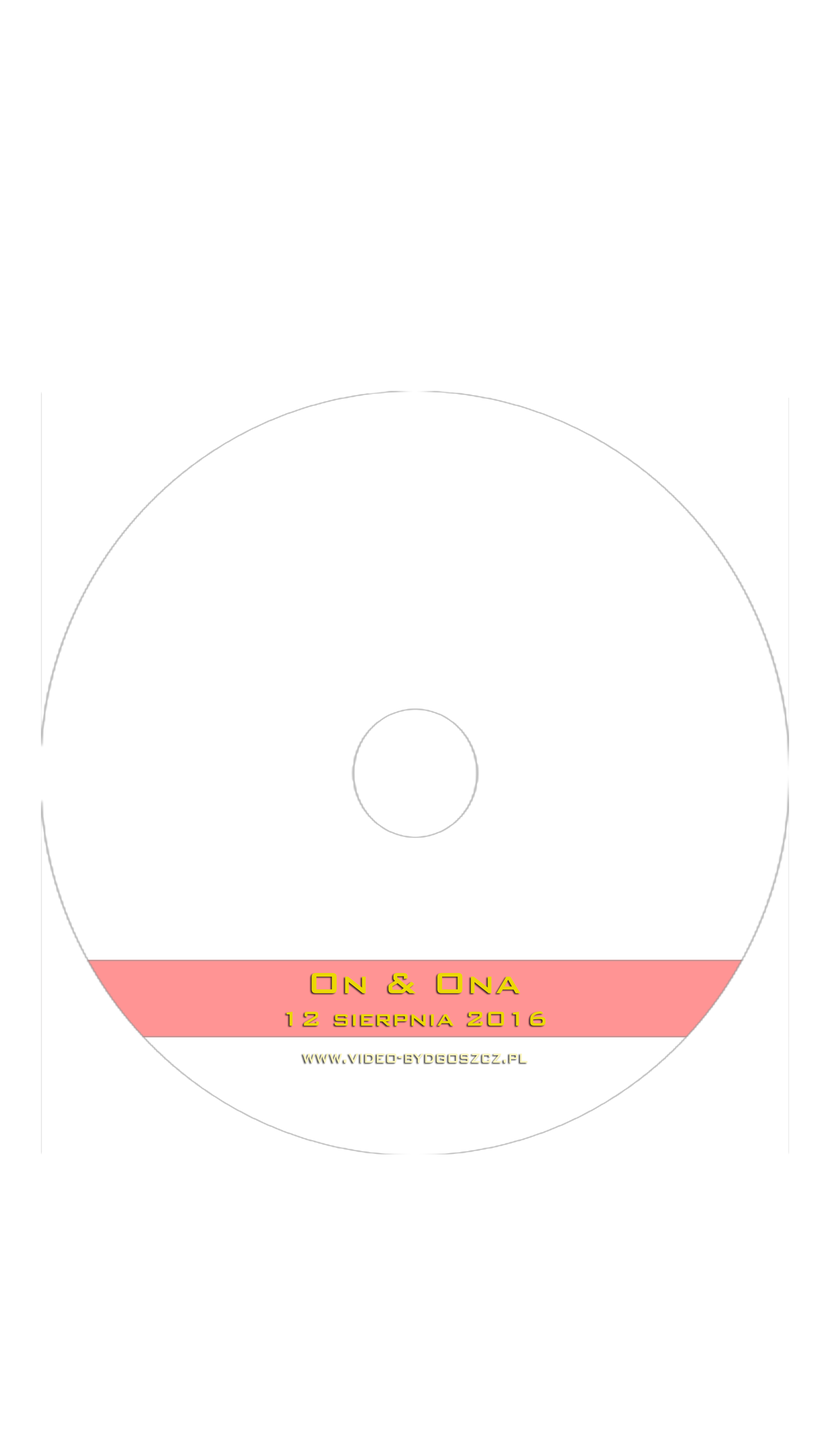
<style>
.page{position:relative;width:830px;height:1437px;background:#ffffff}
.page>*{position:absolute;margin:0}
.t1{font:27.1px "BankGothicBT-Medium";color:#ebd804}
.t2{font:39.2px "BankGothicBT-Medium";color:#ebd804}
.t3{font:21.5px "BankGothicBT-Medium";color:#fcf6bf;scale:0.79 1}
</style>
<div class="page">
<p class="t1" style="left:287px;top:973px;width:259px;height:53px;text-align:center"><span class="t2">On &amp; Ona<br></span>12 sierpnia 2016</p>
<p class="t3" style="left:303px;top:1053px;width:225px;height:10px">www.video-bydgoszcz.pl</p>
</div>
